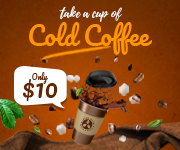
<style>
.page{position:relative;width:180px;height:150px}
.page>*{position:absolute;margin:0}
.t1{font:12.7px "Playlist-Script";color:#ffffff}
.t2{font:25.4px "Pacifico-Regular";color:#ff9600}
.t3{font:7.4px "Pacifico-Regular";color:#622700}
.t4{font:24.8px "Pacifico-Regular";color:#622700}
</style>
<div class="page">
<p class="t1" style="left:59px;top:6px;width:63px;height:16px">take a cup of</p>
<p class="t2" style="left:29px;top:22px;width:123px;height:33px">Cold Coffee</p>
<p class="t3" style="left:32px;top:72px;width:16px;height:12px">Only</p>
<p class="t4" style="left:23px;top:79px;width:35px;height:22px">$10</p>
</div>
